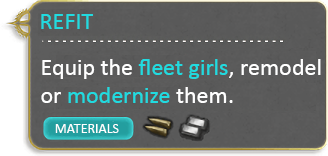
<style>
.page{position:relative;width:328px;height:156px}
.page>*{position:absolute;margin:0}
.t1{font:24px "Calibri";color:#20dbe0}
.t2{font:24px "Calibri";color:#ffffff}
.t3{font:14px "Calibri";color:#ffffff}
</style>
<div class="page">
<p class="t1" style="left:41px;top:14px;width:52px;height:15px">REFIT</p>
<p class="t2" style="left:41px;top:59px;width:280px;height:44px">Equip the <span class="t1">fleet girls</span>, remodel<br>or <span class="t1">modernize </span>them.</p>
<p class="t3" style="left:55px;top:124px;width:64px;height:9px">MATERIALS</p>
</div>
